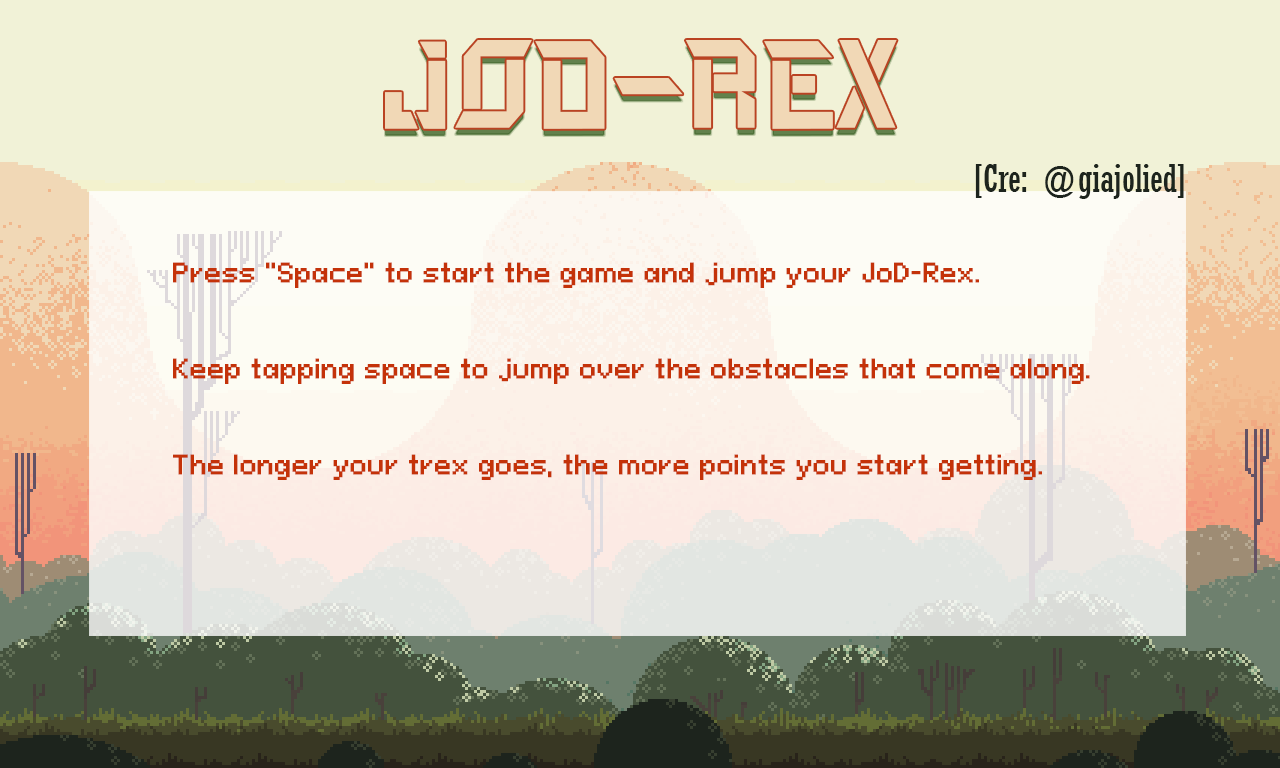
<style>
.page{position:relative;width:1280px;height:768px}
.page>*{position:absolute;margin:0}
.t1{font:37.5px "Rockwell-Condensed";color:#1d241d}
.t2{font:25px/48px "PixeloidSans";color:#c43209;font-weight:bold}
</style>
<div class="page">
<p class="t1" style="left:975px;top:164px;width:209px;height:35px">[Cre: @giajolied]</p>
<p class="t2" style="left:173px;top:262px;width:917px;height:218px">Press "Space" to start the game and jump your JoD-Rex.<br><br>Keep tapping space to jump over the obstacles that come along. <br><br>The longer your trex goes, the more points you start getting.</p>
</div>
